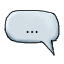
<style>
.page{position:relative;width:64px;height:64px;background:#ffffff}
.page>*{position:absolute;margin:0}
.t1{font:18px "TimesNewRomanPSMT";color:#000000}
</style>
<div class="page">
<p class="t1" style="left:26px;top:30px;width:12px;height:3px">...</p>
</div>
